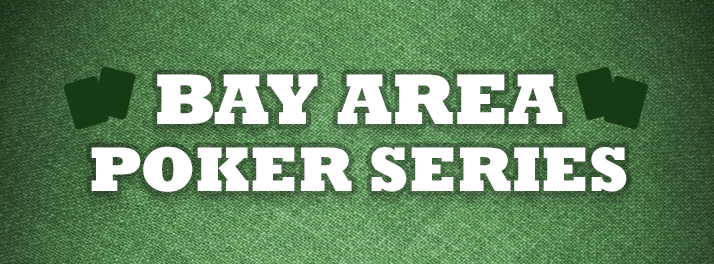
<style>
.page{position:relative;width:714px;height:264px}
.page>*{position:absolute;margin:0}
.t1{font:72.6px "Rockwell-ExtraBold";color:#ffffff}
.t2{font:64px "Rockwell-ExtraBold";color:#ffffff}
.t3{font:64px "Rockwell-ExtraBold";letter-spacing:-0.025em;color:#ffffff}
</style>
<div class="page">
<p class="t1" style="left:157px;top:74px;width:406px;height:50px">BAY AREA</p>
<p class="t2" style="left:91px;top:146px;width:536px;height:46px"><span class="t3">P</span>OKER SERIES</p>
</div>
